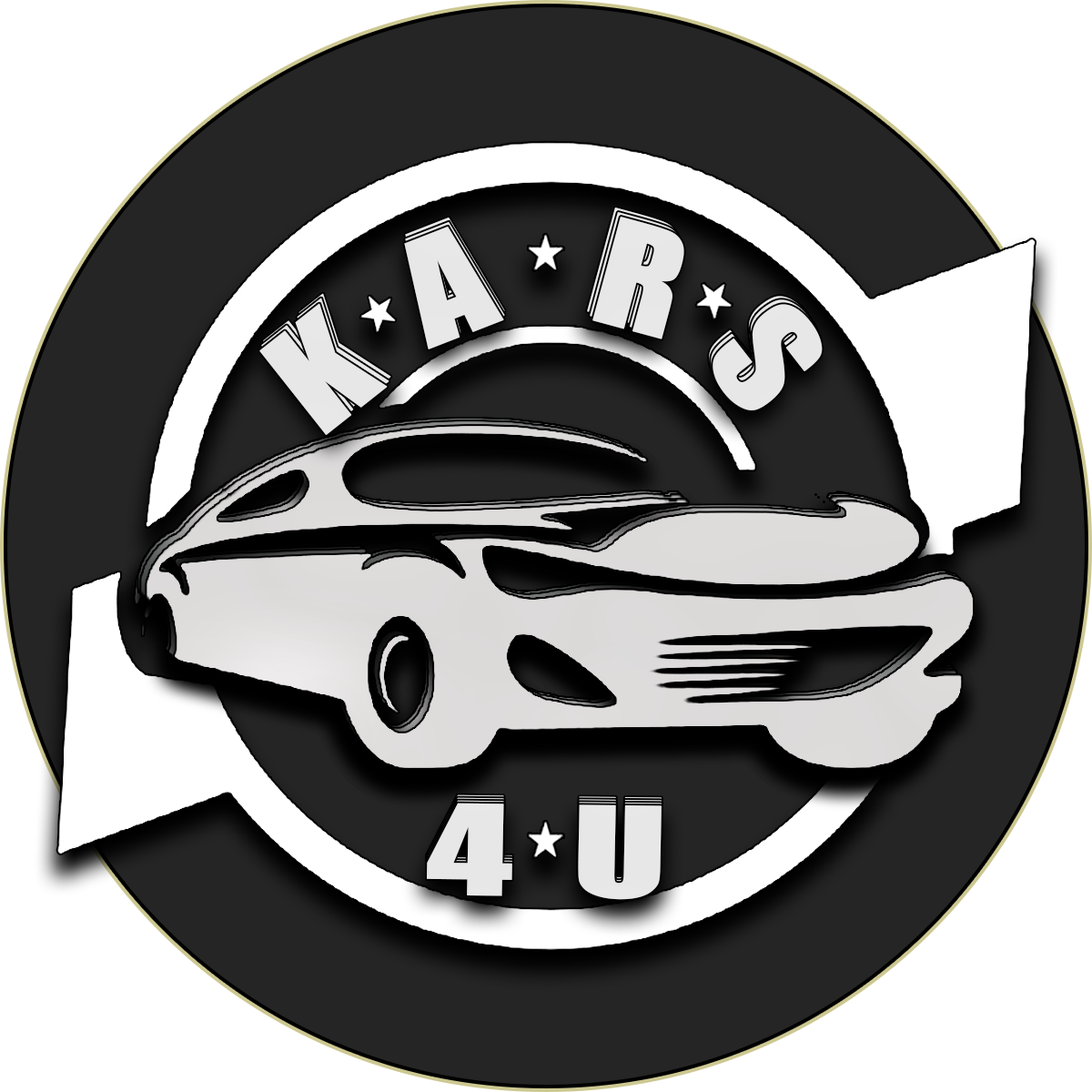
<style>
.page{position:relative;width:1092px;height:1092px;background:#ffffff}
.page>*{position:absolute;margin:0}
.t1{font:134.9px "Impact";letter-spacing:-0.03em;color:#f0efef;font-weight:bold;scale:1.14 1}
.t2{font:134.9px "Impact";letter-spacing:-0.03em;color:#edecec;font-weight:bold;scale:1.14 1}
.t3{font:134.9px "Impact";letter-spacing:-0.03em;color:#ffffff;font-weight:bold;scale:1.14 1}
.t4{font:134.9px "Impact";letter-spacing:-0.03em;color:#f2f0f0;font-weight:bold;scale:1.14 1}
.t5{font:115.4px "Impact";letter-spacing:-0.03em;color:#f0eeee;font-weight:bold;scale:1.5 1}
</style>
<div class="page">
<p class="t1" style="left:587px;top:207px;width:92px;height:123px;rotate:15deg">R</p>
<p class="t2" style="left:405px;top:217px;width:100px;height:123px;rotate:-21deg">A</p>
<p class="t2" style="left:405px;top:221px;width:100px;height:124px;rotate:-21deg">A</p>
<p class="t1" style="left:590px;top:212px;width:92px;height:123px;rotate:15deg">R</p>
<p class="t1" style="left:592px;top:217px;width:92px;height:122px;rotate:15deg">R</p>
<p class="t2" style="left:404px;top:226px;width:100px;height:123px;rotate:-21deg">A</p>
<p class="t3" style="left:263px;top:293px;width:128px;height:132px;rotate:-38deg">K</p>
<p class="t3" style="left:259px;top:303px;width:129px;height:132px;rotate:-38deg">K</p>
<p class="t3" style="left:261px;top:298px;width:128px;height:132px;rotate:-38deg">K</p>
<p class="t4" style="left:709px;top:296px;width:110px;height:106px;rotate:52deg">S</p>
<p class="t4" style="left:711px;top:299px;width:110px;height:107px;rotate:52deg">S</p>
<p class="t4" style="left:713px;top:304px;width:110px;height:106px;rotate:52deg">S</p>
<p class="t5" style="left:427px;top:794px;width:235px;height:98px;rotate:1deg">4  U</p>
<p class="t5" style="left:427px;top:797px;width:235px;height:98px;rotate:1deg">4  U</p>
<p class="t5" style="left:427px;top:800px;width:235px;height:97px;rotate:1deg">4  U</p>
<p class="t5" style="left:427px;top:803px;width:235px;height:97px;rotate:1deg">4  U</p>
</div>
